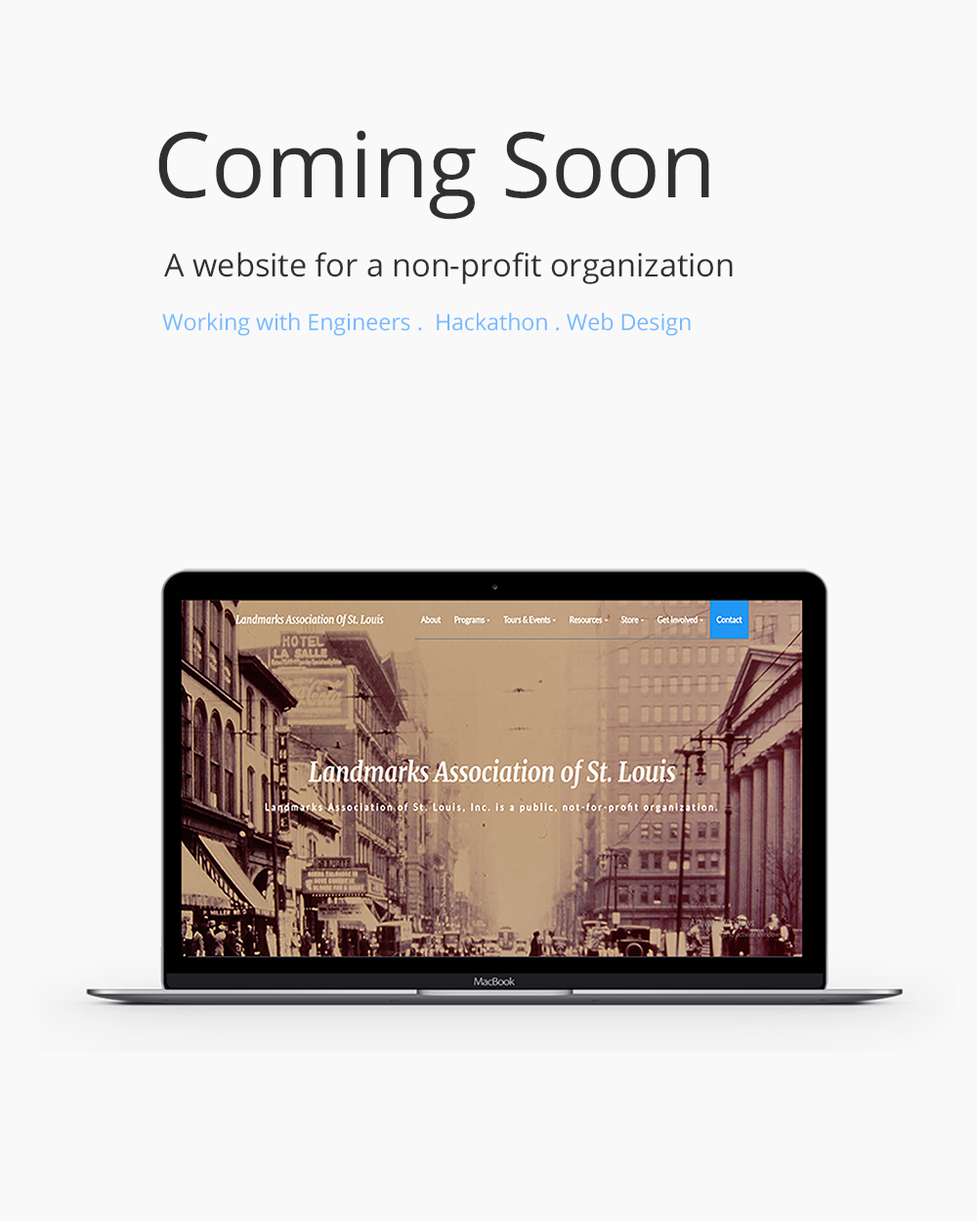
<style>
.page{position:relative;width:977px;height:1221px;background:#f9f9fa}
.page>*{position:absolute;margin:0}
.t1{font:90.5px "OpenSans";color:#303030}
.t2{font:31.7px "OpenSans";color:#303030}
.t3{font:22.6px "OpenSans";color:#74b9ff}
</style>
<div class="page">
<p class="t1" style="left:158px;top:130px;width:551px;height:90px">Coming Soon</p>
<p class="t2" style="left:164px;top:252px;width:569px;height:32px">A website for a non-profit organization</p>
<p class="t3" style="left:162px;top:313px;width:529px;height:23px">Working with Engineers .  Hackathon . Web Design</p>
</div>
